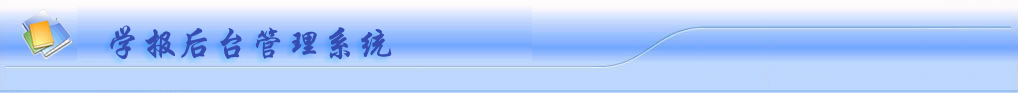
<style>
.page{position:relative;width:1018px;height:93px}
.page>*{position:absolute;margin:0}
.t1{font:36px "STXingkai";color:#354db3}
</style>
<div class="page">
<p class="t1" style="left:110px;top:25px;width:282px;height:35px">学报后台管理系统</p>
</div>
